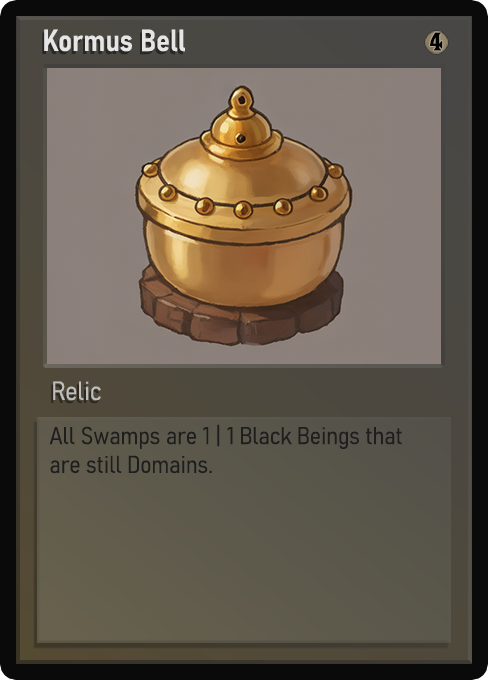
<style>
.page{position:relative;width:488px;height:680px}
.page>*{position:absolute;margin:0}
.t1{font:30px "Bahnschrift-SemiBoldSemiCondensed";color:#f2f2f2;font-weight:bold}
.t2{font:25px "WTRRoycroft";color:#000000;font-weight:bold;scale:1.09 1}
.t3{font:26px "Bahnschrift-LightSemiCondensed";color:#c8c8c8;font-weight:bold}
.t4{font:24px "Bahnschrift-LightSemiCondensed";color:#1e1e1e;font-weight:bold}
</style>
<div class="page">
<p class="t1" style="left:44px;top:29px;width:141px;height:23px;opacity:0.9">Kormus Bell</p>
<p class="t2" style="left:430px;top:32px;width:13px;height:19px">4</p>
<p class="t3" style="left:53px;top:381px;width:48px;height:20px;opacity:0.9">Relic</p>
<p class="t4" style="left:49px;top:424px;width:353px;height:50px">All Swamps are 1 | 1 Black Beings that are still Domains.</p>
</div>
